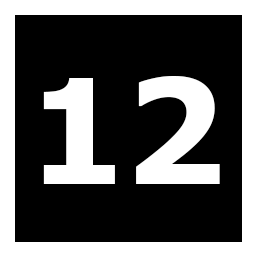
<style>
.page{position:relative;width:256px;height:256px;background:#000000}
.page>*{position:absolute;margin:0}
.t1{font:145.8px "Verdana-Bold";letter-spacing:-0.04em;color:#ffffff;text-transform:uppercase}
</style>
<div class="page">
<p class="t1" style="left:43px;top:76px;width:177px;height:108px">12</p>
</div>
